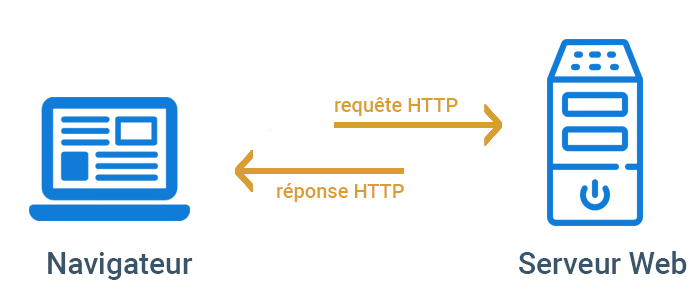
<style>
.page{position:relative;width:700px;height:300px;background:#ffffff}
.page>*{position:absolute;margin:0}
.t1{font:20px "Roboto-Medium";color:#da9d32}
.t2{font:30px "Roboto-Medium";color:#3a556a}
</style>
<div class="page">
<p class="t1" style="left:335px;top:97px;width:123px;height:19px">requête HTTP</p>
<p class="t1" style="left:277px;top:183px;width:127px;height:19px">réponse HTTP</p>
<p class="t2" style="left:48px;top:252px;width:145px;height:28px">Navigateur</p>
<p class="t2" style="left:519px;top:251px;width:168px;height:23px">Serveur Web</p>
</div>
